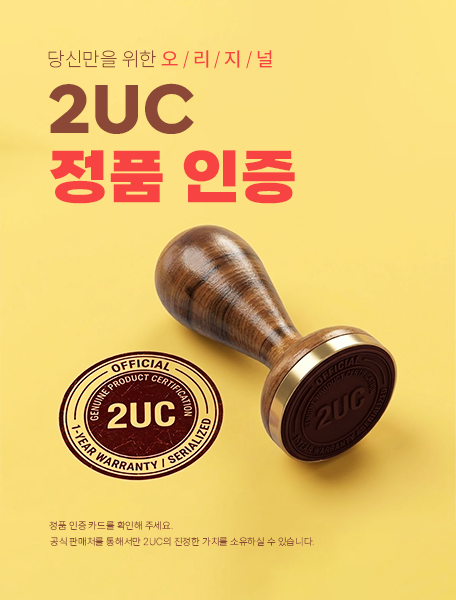
<style>
.page{position:relative;width:456px;height:600px}
.page>*{position:absolute;margin:0}
.t1{font:20px "Pretendard-Thin";letter-spacing:0.01em;color:#8b4836}
.t2{font:20px "Pretendard-Medium";letter-spacing:-0.01em;color:#f74442}
.t3{font:20px "Pretendard-Thin";letter-spacing:-0.01em;color:#f74442}
.t4{font:60px "SBAggroB";color:#8b4836}
.t5{font:60px "SBAggroB";color:#f74442}
.t6{font:10px "Pretendard-Thin";color:#8b4836}
</style>
<div class="page">
<p class="t1" style="left:48px;top:50px;width:224px;height:19px">당신만을 위한 <span class="t2">오</span><span class="t3"> / </span><span class="t2">리</span><span class="t3"> / </span><span class="t2">지</span><span class="t3"> / </span><span class="t2">널</span></p>
<p class="t4" style="left:49px;top:83px;width:145px;height:51px">2UC</p>
<p class="t5" style="left:50px;top:150px;width:245px;height:54px">정품 인증</p>
<p class="t6" style="left:49px;top:521px;width:124px;height:9px">정품 인증 카드를 확인해 주세요.</p>
<p class="t6" style="left:50px;top:537px;width:264px;height:9px">공식 판매처를 통해서만 2UC의 진정한 가치를 소유하실 수 있습니다.</p>
</div>
